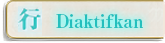
<style>
.page{position:relative;width:165px;height:43px}
.page>*{position:absolute;margin:0}
.t1{font:18px "RyuminPro-ExBold";letter-spacing:-0.04em;color:#24bfbd}
</style>
<div class="page">
<p class="t1" style="left:56px;top:14px;width:87px;height:14px">Diaktifkan</p>
</div>
